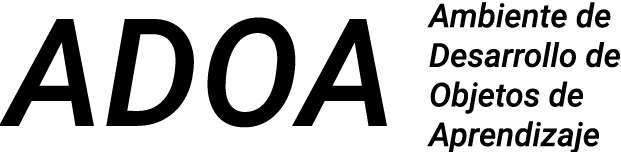
<style>
.page{position:relative;width:621px;height:152px;background:#ffffff}
.page>*{position:absolute;margin:0}
.t1{font:33px "Roboto-MediumItalic";color:#000000}
.t2{font:150px "Roboto-MediumItalic";color:#000000}
</style>
<div class="page">
<p class="t1" style="left:427px;top:2px;width:193px;height:152px">Ambiente de<br>Desarrollo de<br>Objetos de <br>Aprendizaje</p>
<p class="t2" style="left:0px;top:17px;width:387px;height:111px">ADOA</p>
</div>
